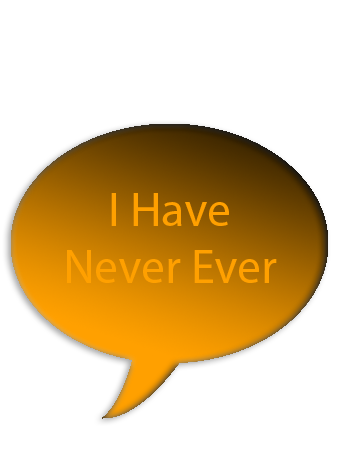
<style>
.page{position:relative;width:339px;height:452px;background:#ffffff}
.page>*{position:absolute;margin:0}
.t1{font:48px "MyriadPro-Regular";color:#ffa000}
</style>
<div class="page">
<p class="t1" style="left:67px;top:193px;width:210px;height:90px;text-align:center">I Have Never Ever</p>
</div>
